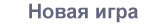
<style>
.page{position:relative;width:168px;height:24px;background:#ffffff}
.page>*{position:absolute;margin:0}
.t1{font:20px "Arial-BoldMT";color:#646585}
</style>
<div class="page">
<p class="t1" style="left:29px;top:3px;width:109px;height:20px">Новая игра</p>
</div>
